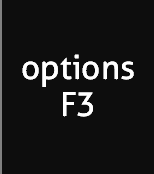
<style>
.page{position:relative;width:154px;height:174px;background:#0d0d0d}
.page>*{position:absolute;margin:0}
.t1{font:33.3px "Aller-Regular";color:#ffffff}
</style>
<div class="page">
<p class="t1" style="left:22px;top:54px;width:112px;height:33px">options</p>
<p class="t1" style="left:63px;top:92px;width:30px;height:25px">F3</p>
</div>
